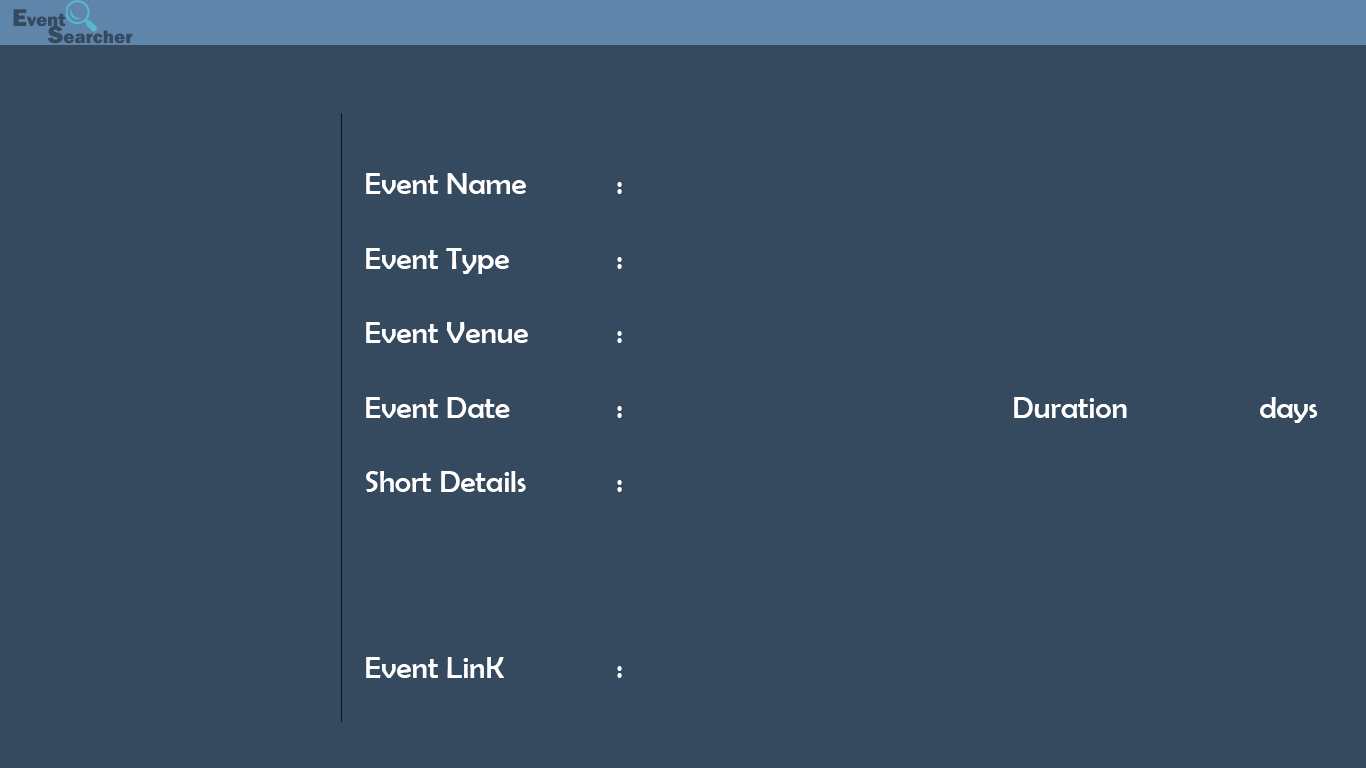
<style>
.page{position:relative;width:1366px;height:768px;background:#35495f}
.page>*{position:absolute;margin:0}
.t1{font:18.8px "FranklinGothic-Heavy";color:#35495f}
.t2{font:25.1px "FranklinGothic-Heavy";color:#35495f}
.t3{font:31px "BerlinSansFB-Reg";color:#ffffff}
</style>
<div class="page">
<p class="t1" style="left:13px;top:9px;width:53px;height:18px"><span class="t2">E</span>vent</p>
<p class="t1" style="left:47px;top:26px;width:86px;height:18px"><span class="t2">S</span>earcher</p>
<p class="t3" style="left:366px;top:173px;width:952px;height:505px">Event Name   :<br><br>Event Type   :<br><br>Event Venue   :          <br><br>Event Date   :            Duration                 days<br><br>Short Details   : <br><br><br><br><br>Event LinK    :</p>
</div>
